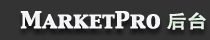
<style>
.page{position:relative;width:210px;height:40px;background:#333333}
.page>*{position:absolute;margin:0}
.t1{font:19.8px "CapitalsRegular";color:#edecf0;font-weight:bold;scale:1.11 1}
.t2{font:18px "AdobeHeitiStd-Regular";color:#b5dbb1;font-weight:bold;scale:1.11 1}
</style>
<div class="page">
<p class="t1" style="left:20px;top:11px;width:186px;height:19px">MarketPro <span class="t2">后台</span></p>
</div>
